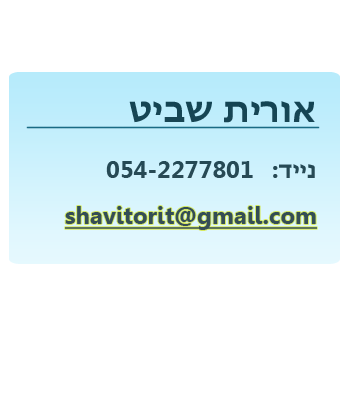
<style>
.page{position:relative;width:350px;height:400px;background:#ffffff}
.page>*{position:absolute;margin:0}
.t1{font:36px "Gisha-Bold";color:#154554}
.t2{font:24px "Gisha-Bold";color:#264955}
.t3{font:24px "Gisha-Bold";color:#344e56;text-decoration:underline}
</style>
<div class="page">
<p class="t1" style="left:129px;top:101px;width:186px;height:22px">טיבש תירוא</p>
<p class="t2" style="left:106px;top:161px;width:147px;height:17px">054-2277801</p>
<p class="t2" style="left:273px;top:164px;width:42px;height:14px">:דיינ</p>
<p class="t3" style="left:65px;top:206px;width:252px;height:24px">shavitorit@gmail.com</p>
</div>
